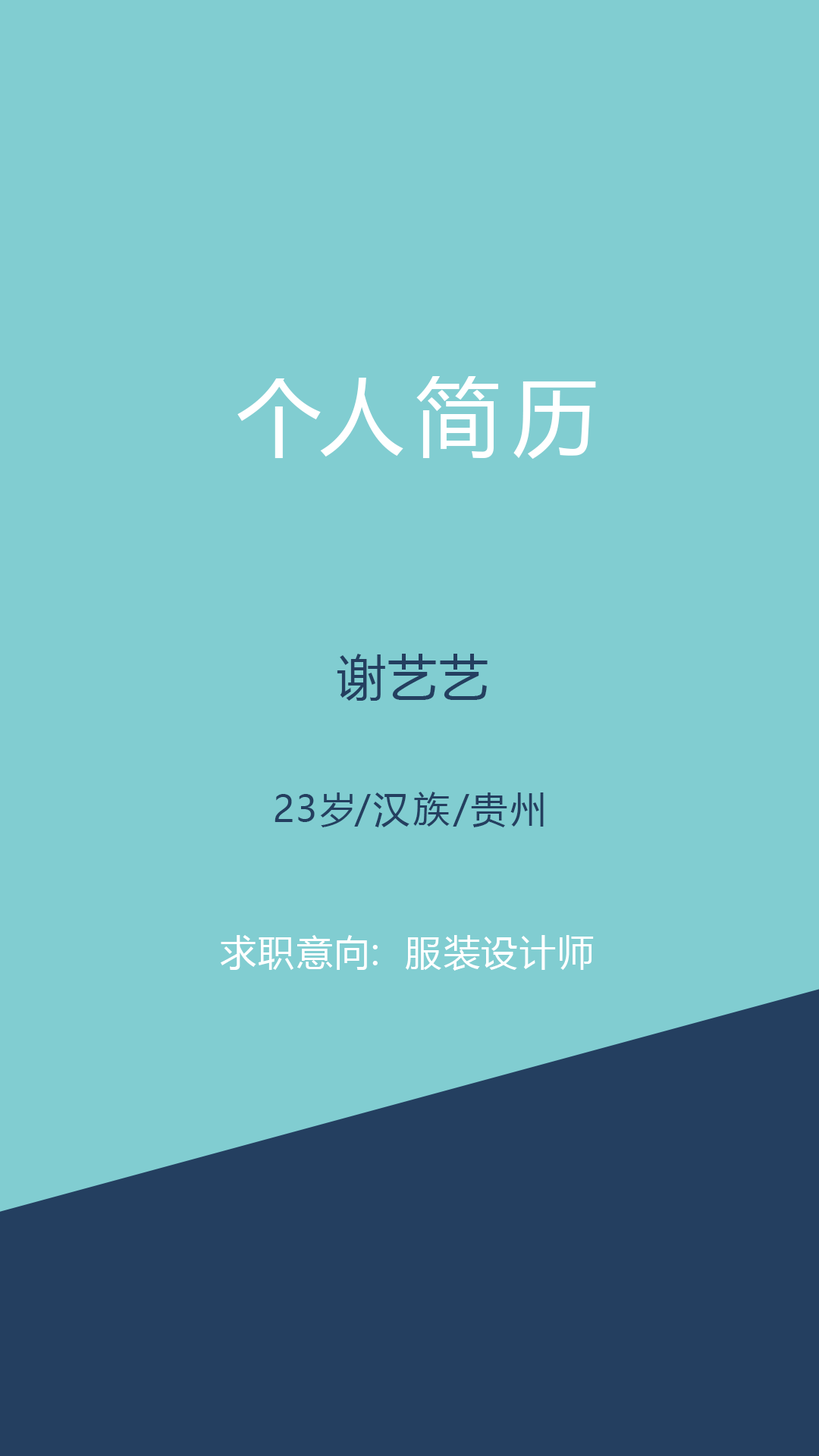
<style>
.page{position:relative;width:819px;height:1456px;background:#81cdd1}
.page>*{position:absolute;margin:0}
.t1{font:84.9px "MicrosoftYaHei";letter-spacing:0.16em;color:#ffffff}
.t2{font:49.3px "MicrosoftYaHei";letter-spacing:0.04em;color:#243f60}
.t3{font:36.4px "MicrosoftYaHei";letter-spacing:0.08em;color:#243f60}
.t4{font:36.4px "MicrosoftYaHei";letter-spacing:0.04em;color:#ffffff}
</style>
<div class="page">
<p class="t1" style="left:237px;top:376px;width:359px;height:83px">个人简历</p>
<p class="t2" style="left:337px;top:654px;width:151px;height:47px">谢艺艺</p>
<p class="t3" style="left:275px;top:792px;width:269px;height:35px">23岁/汉族/贵州</p>
<p class="t4" style="left:221px;top:935px;width:373px;height:36px">求职意向:  服装设计师</p>
</div>
